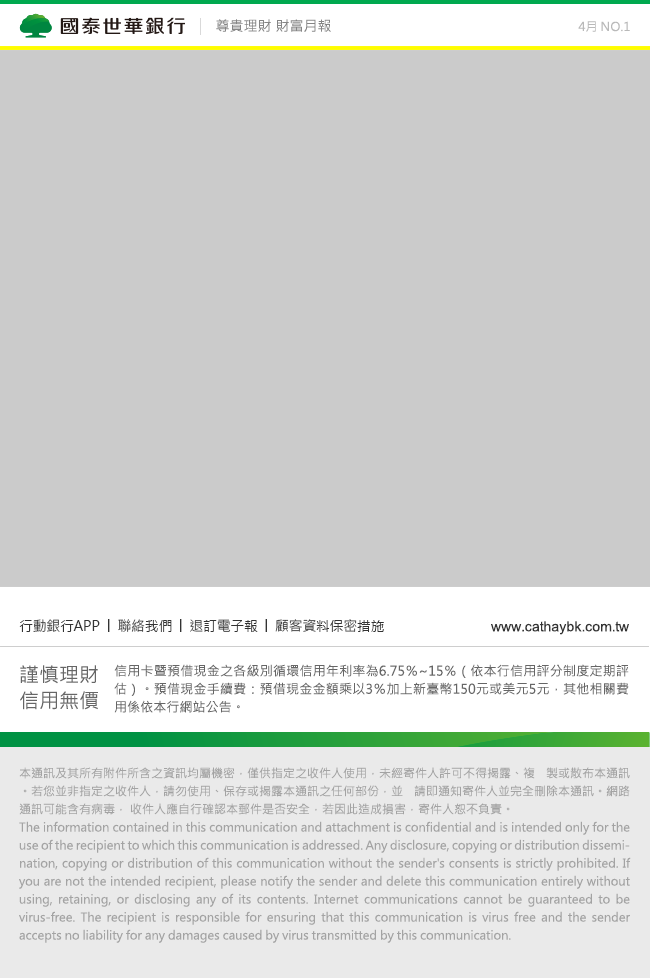
<style>
.page{position:relative;width:650px;height:978px;background:#cbcbcb}
.page>*{position:absolute;margin:0}
.t1{font:14px "MicrosoftJhengHeiRegular";color:#858585}
.t2{font:12px "MicrosoftJhengHeiRegular";color:#b9b9b9}
.t3{font:14px "MicrosoftJhengHeiRegular";color:#333333}
.t4{font:14px "ArialMT";color:#333333}
.t5{font:20px/26px "MicrosoftJhengHeiRegular";color:#666666}
.t6{font:13px/18.1px "MicrosoftJhengHeiRegular";color:#666666}
.t7{font:12px/18px "MicrosoftJhengHeiRegular";color:#a3a3a3}
</style>
<div class="page">
<p class="t1" style="left:216px;top:19px;width:115px;height:13px">尊貴理財 財富月報</p>
<p class="t2" style="left:578px;top:21px;width:52px;height:11px">4月 NO.1</p>
<p class="t3" style="left:19px;top:619px;width:365px;height:13px">行動銀行APP │ 聯絡我們 │ 退訂電子報 │ 顧客資料保密措施</p>
<p class="t4" style="left:491px;top:621px;width:138px;height:14px">www.cathaybk.com.tw</p>
<p class="t5" style="left:20px;top:665px;width:78px;height:45px;text-align:center">謹慎理財<br>信用無價</p>
<p class="t6" style="left:114px;top:664px;width:515px;height:49px;text-align:justify">信用卡暨預借現金之各級別循環信用年利率為6.75％~15％（依本行信用評分制度定期評估）。預借現金手續費：預借現金金額乘以3％加上新臺幣150元或美元5元，其他相關費用係依本行網站公告。</p>
<p class="t7" style="left:19px;top:767px;width:612px;height:176px;text-align:justify">本通訊及其所有附件所含之資訊均屬機密，僅供指定之收件人使用，未經寄件人許可不得揭露、複 製或散布本通訊。若您並非指定之收件人，請勿使用、保存或揭露本通訊之任何部份，並 請即通知寄件人並完全刪除本通訊。網路通訊可能含有病毒， 收件人應自行確認本郵件是否安全，若因此造成損害，寄件人恕不負責。<br>The information contained in this communication and attachment is confidential and is intended only for the use of the recipient to which this communication is addressed. Any disclosure, copying or distribution dissemination, copying or distribution of this communication without the sender's consents is strictly prohibited. If you are not the intended recipient, please notify the sender and delete this communication entirely without using, retaining, or disclosing any of its contents. Internet communications cannot be guaranteed to be virus-free. The recipient is responsible for ensuring that this communication is virus free and the sender accepts no liability for any damages caused by virus transmitted by this communication.</p>
</div>
